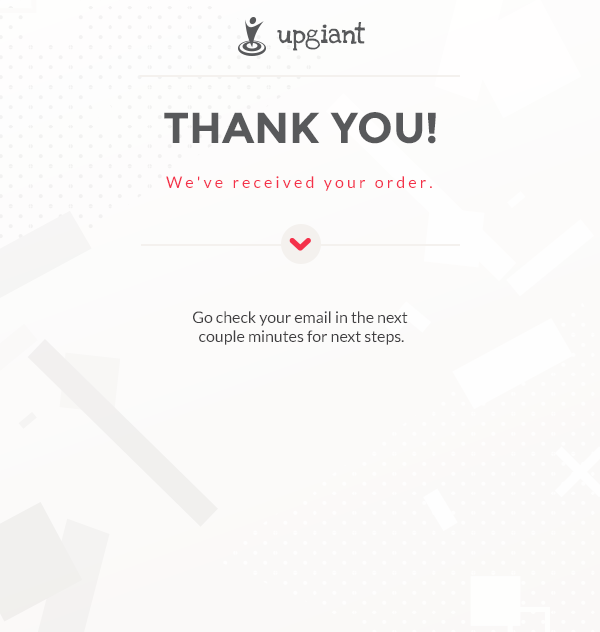
<style>
.page{position:relative;width:600px;height:632px}
.page>*{position:absolute;margin:0}
.t1{font:19.2px "LoveYaLikeASisterSolid";color:#58595b}
.t2{font:43.2px "Montserrat-Bold";color:#58595b}
.t3{font:16px "Lato-Regular";color:#f4314a}
.t4{font:16px "Lato-Regular";color:#414042}
</style>
<div class="page">
<p class="t1" style="left:277px;top:22px;width:88px;height:29px">upgiant</p>
<p class="t2" style="left:164px;top:112px;width:272px;height:32px">THANK YOU!</p>
<p class="t3" style="left:166px;top:176px;width:266px;height:15px">W e ' v e   r e c e i v e d   y o u r   o r d e r .</p>
<p class="t4" style="left:193px;top:311px;width:215px;height:34px;text-align:center">Go check your email in the next <br>couple minutes for next steps.</p>
</div>
